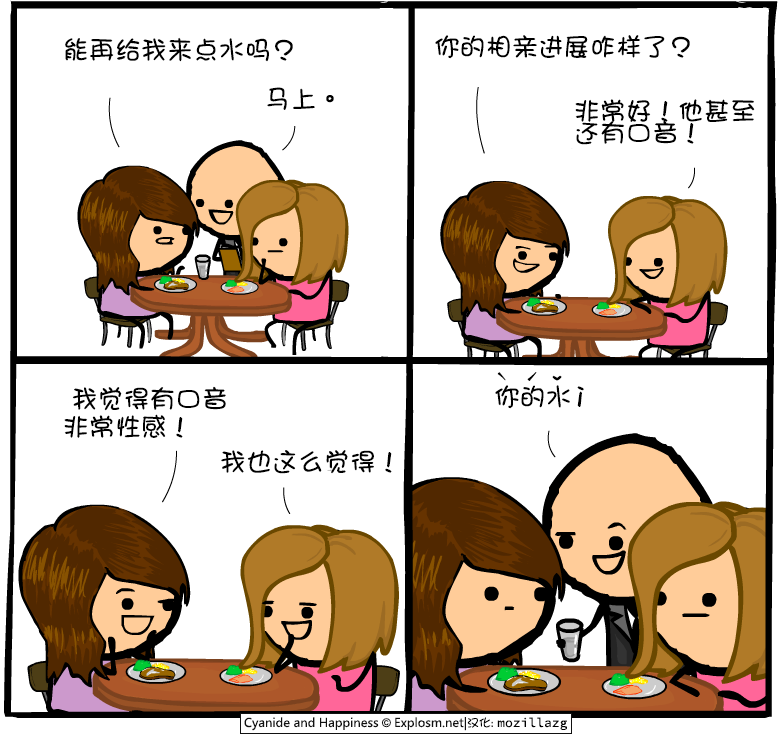
<style>
.page{position:relative;width:780px;height:735px;background:#ffffff}
.page>*{position:absolute;margin:0}
.t1{font:26px "DFGirl";color:#000000}
.t2{font:26px/22px "DFGirl";color:#000000}
.t3{font:16px "DFGirl";color:#000000}
.t4{font:18px "DFGirl";color:#000000}
.t5{font:26px/28px "DFGirl";color:#000000}
</style>
<div class="page">
<p class="t1" style="left:65px;top:37px;width:228px;height:25px">能再给我来点水吗？</p>
<p class="t1" style="left:435px;top:35px;width:255px;height:24px">你的相亲进展咋样了？</p>
<p class="t1" style="left:267px;top:87px;width:67px;height:23px">马上。</p>
<p class="t2" style="left:575px;top:99px;width:180px;height:46px">非常好！他甚至<br>还有口音！</p>
<p class="t3" style="left:497px;top:372px;width:9px;height:9px"><span class="t1"> </span>ˋ</p>
<p class="t4" style="left:527px;top:372px;width:10px;height:9px">ˊ</p>
<p class="t1" style="left:552px;top:375px;width:10px;height:6px">ˇ</p>
<p class="t5" style="left:64px;top:386px;width:162px;height:52px">我觉得有口音<br>非常性感！</p>
<p class="t1" style="left:495px;top:385px;width:75px;height:24px">你的水</p>
<p class="t1" style="left:577px;top:386px;width:7px;height:21px;rotate:180deg">！</p>
<p class="t1" style="left:221px;top:450px;width:171px;height:24px">我也这么觉得！</p>
</div>
